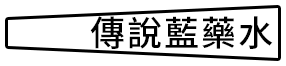
<style>
.page{position:relative;width:286px;height:66px;background:#ffffff}
.page>*{position:absolute;margin:0}
.t1{font:35px "NotoSansCJKtc-Medium";letter-spacing:0.06em;color:#000000}
</style>
<div class="page">
<p class="t1" style="left:90px;top:16px;width:183px;height:33px">傳說藍藥水</p>
</div>
